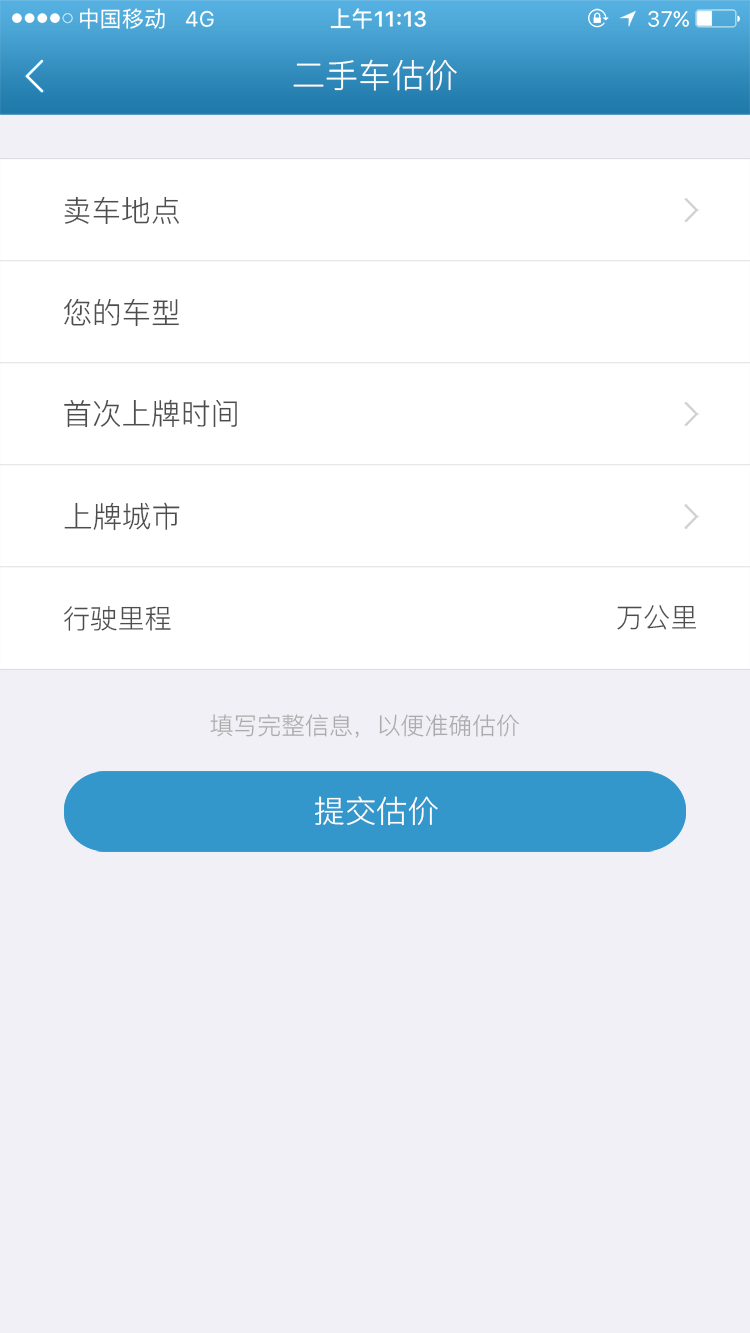
<style>
.page{position:relative;width:750px;height:1333px;background:#f0f0f6}
.page>*{position:absolute;margin:0}
.t1{font:33.3px "PingFang-SC-Regular";color:#ffffff}
.t2{font:29.5px "PingFang-SC-Regular";color:#4d4d4d}
.t3{font:29.4px "PingFang-SC-Regular";color:#4d4d4d}
.t4{font:27.2px "PingFang-SC-Regular";color:#4d4d4d}
.t5{font:24px "PingFang-SC-Regular";color:#ababab}
.t6{font:31px "PingFang-SC-Regular";color:#ffffff}
</style>
<div class="page">
<p class="t1" style="left:293px;top:59px;width:164px;height:32px">二手车估价</p>
<p class="t2" style="left:64px;top:196px;width:115px;height:29px">卖车地点</p>
<p class="t2" style="left:63px;top:298px;width:116px;height:29px">您的车型</p>
<p class="t3" style="left:64px;top:399px;width:173px;height:29px">首次上牌时间</p>
<p class="t3" style="left:64px;top:502px;width:116px;height:29px">上牌城市</p>
<p class="t4" style="left:64px;top:606px;width:107px;height:25px">行驶里程</p>
<p class="t4" style="left:617px;top:605px;width:79px;height:25px">万公里</p>
<p class="t5" style="left:210px;top:714px;width:309px;height:24px">填写完整信息，以便准确估价</p>
<p class="t6" style="left:315px;top:796px;width:123px;height:30px">提交估价</p>
</div>
